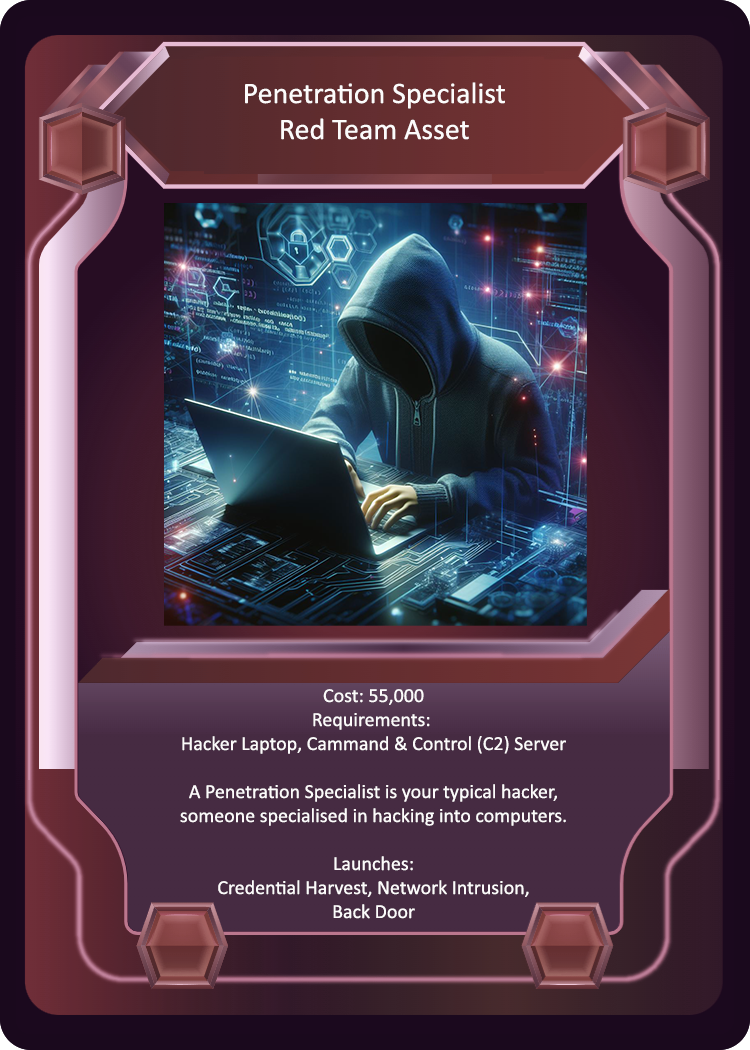
<style>
.page{position:relative;width:750px;height:1050px}
.page>*{position:absolute;margin:0}
.t1{font:30px "Calibri";color:#fcfbfb}
.t2{font:20px "Calibri";color:#fcfbfb}
</style>
<div class="page">
<p class="t1" style="left:245px;top:82px;width:260px;height:58px;text-align:center">Penetration Specialist<br>Red Team Asset</p>
<p class="t2" style="left:180px;top:689px;width:386px;height:230px;text-align:center">Cost: 55,000<br>Requirements: <br>Hacker Laptop, Cammand &amp; Control (C2) Server<br><br>A Penetration Specialist is your typical hacker,<br>someone specialised in hacking into computers.<br><br>Launches:<br>Credential Harvest, Network Intrusion,<br>Back Door</p>
</div>
